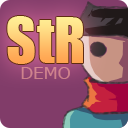
<style>
.page{position:relative;width:128px;height:128px}
.page>*{position:absolute;margin:0}
.t1{font:58.3px "Impact"}
.t2{font:16.7px "Verdana";color:#c77c85}
</style>
<div class="page">
<p class="t1" style="left:7px;top:16px;width:76px;height:48px">StR</p>
<p class="t2" style="left:21px;top:67px;width:49px;height:12px">DEMO</p>
</div>
